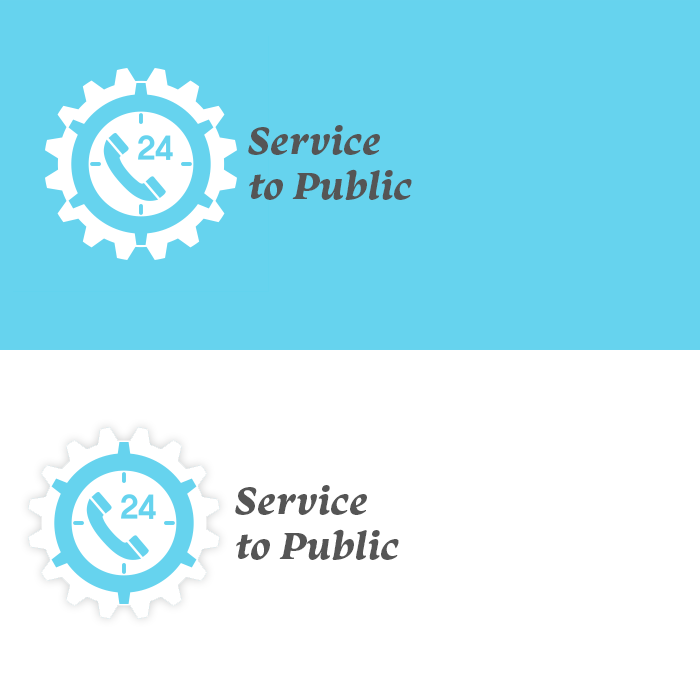
<style>
.page{position:relative;width:700px;height:700px;background:#ffffff}
.page>*{position:absolute;margin:0}
.t1{font:40px/45px "Monarcha-BoldItalic";color:#555555}
</style>
<div class="page">
<p class="t1" style="left:248px;top:125px;width:164px;height:75px">Service <br>to Public</p>
<p class="t1" style="left:235px;top:485px;width:164px;height:75px">Service <br>to Public</p>
</div>
